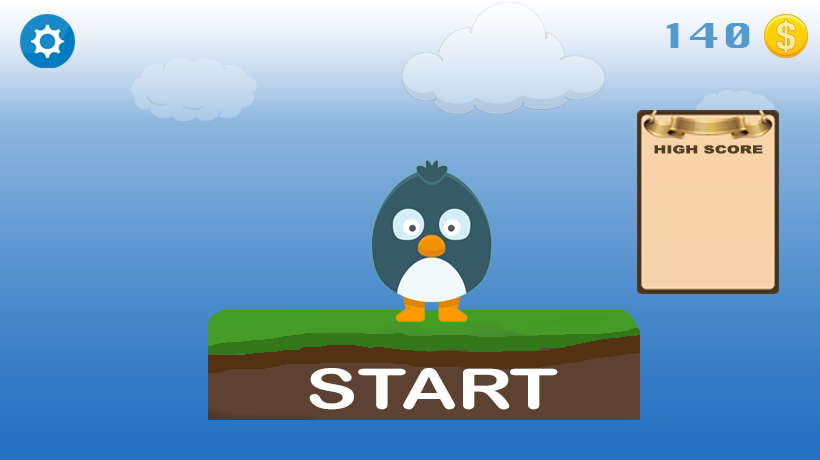
<style>
.page{position:relative;width:820px;height:460px}
.page>*{position:absolute;margin:0}
.t1{font:33.3px "Krungthep";color:#529bcf;scale:1.4 1}
.t2{font:11.1px "Arial-Black";color:#50381c;scale:1.4 1}
.t3{font:55.6px "ArialRoundedMTBold";color:#ffffff;scale:1.4 1}
</style>
<div class="page">
<p class="t1" style="left:666px;top:23px;width:84px;height:25px">140</p>
<p class="t2" style="left:654px;top:145px;width:109px;height:9px">HIGH SCORE</p>
<p class="t3" style="left:309px;top:368px;width:249px;height:42px">START</p>
</div>
